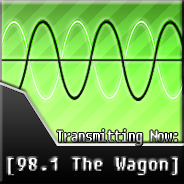
<style>
.page{position:relative;width:184px;height:184px}
.page>*{position:absolute;margin:0}
.t1{font:14.7px "Fixedsys";letter-spacing:-0.01em;color:#ffffff;scale:0.8 1}
.t2{font:18.6px "Fixedsys";letter-spacing:-0.01em;scale:0.95 1}
</style>
<div class="page">
<p class="t1" style="left:57px;top:129px;width:121px;height:17px">Transmitting Now:</p>
<p class="t2" style="left:8px;top:158px;width:170px;height:18px">[98.1 The Wagon]</p>
</div>
